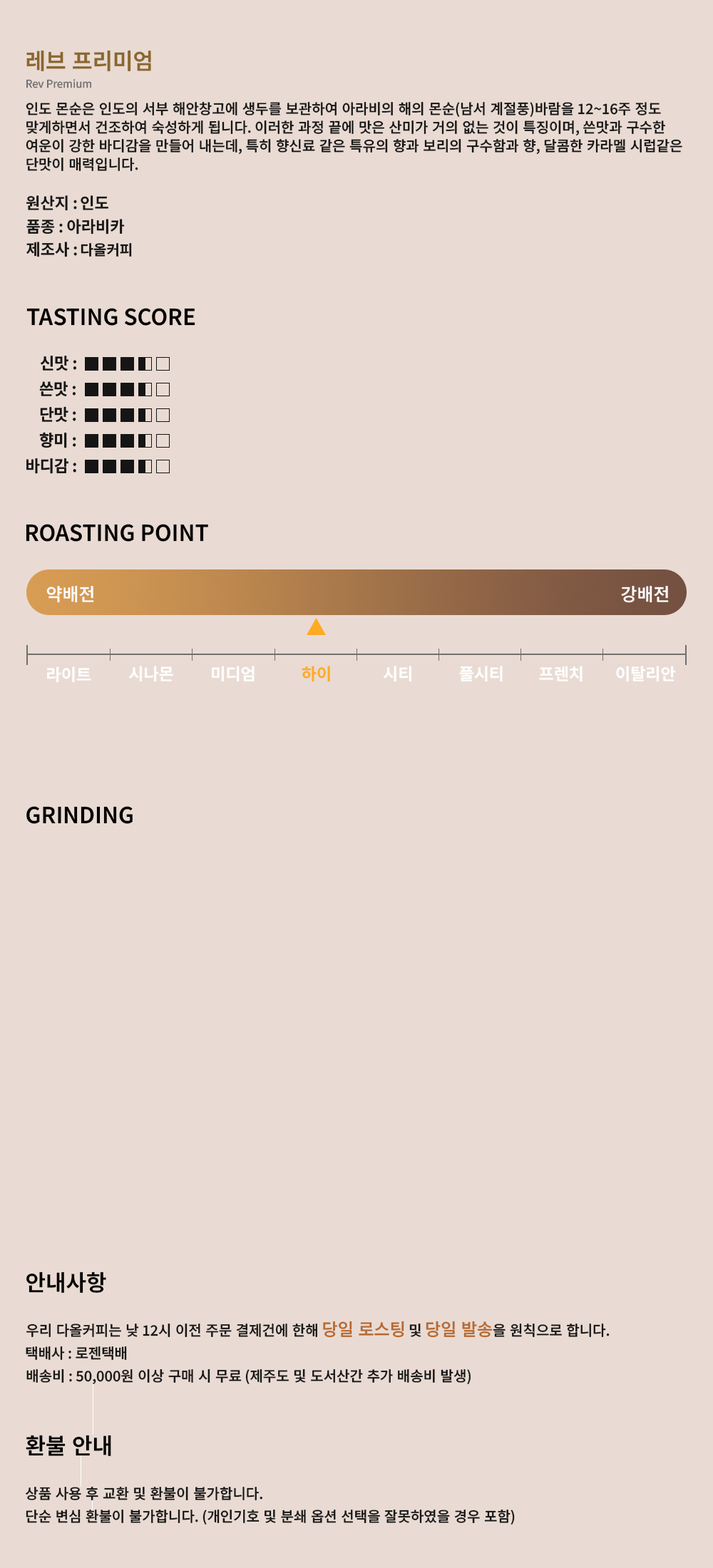
<style>
.page{position:relative;width:713px;height:1568px;background:#e9dbd3}
.page>*{position:absolute;margin:0}
.t1{font:22.1px "NotoSansKR-SemiBold";color:#8b662d}
.t2{font:10.7px "NotoSansKR-Regular";color:#727272}
.t3{font:14.3px/18.5px "NotoSansKR-Medium";color:#151515}
.t4{font:15.7px "NotoSansKR-SemiBold";color:#151515}
.t5{font:14.3px "NotoSansKR-SemiBold";color:#151515}
.t6{font:22.1px "NotoSansKR-SemiBold";color:#000000}
.t7{font:16.1px "NotoSansKR-SemiBold";color:#151515}
.t8{font:16px "NotoSansKR-SemiBold";color:#151515}
.t9{font:17.7px "NotoSansKR-Medium";color:#ffffff}
.t10{font:16.4px "NotoSansKR-SemiBold";color:#ffffff}
.t11{font:16.4px "NotoSansKR-SemiBold";color:#ffaa25}
.t12{font:14.3px "NotoSansKR-Medium";color:#151515}
.t13{font:17.1px "NotoSansKR-Medium";color:#b76930}
</style>
<div class="page">
<p class="t1" style="left:26px;top:50px;width:125px;height:21px">레브 프리미엄</p>
<p class="t2" style="left:26px;top:79px;width:65px;height:9px">Rev Premium</p>
<p class="t3" style="left:26px;top:102px;width:656px;height:69px">인도 몬순은 인도의 서부 해안창고에 생두를 보관하여 아라비의 해의 몬순(남서 계절풍)바람을 12~16주 정도<br>맞게하면서 건조하여 숙성하게 됩니다. 이러한 과정 끝에 맛은 산미가 거의 없는 것이 특징이며, 쓴맛과 구수한<br>여운이 강한 바디감을 만들어 내는데, 특히 향신료 같은 특유의 향과 보리의 구수함과 향, 달콤한 카라멜 시럽같은<br>단맛이 매력입니다.</p>
<p class="t4" style="left:26px;top:195px;width:51px;height:16px">원산지 :</p>
<p class="t4" style="left:81px;top:195px;width:27px;height:15px">인도</p>
<p class="t4" style="left:26px;top:220px;width:37px;height:14px">품종 :</p>
<p class="t4" style="left:67px;top:219px;width:58px;height:15px">아라비카</p>
<p class="t4" style="left:26px;top:242px;width:51px;height:15px">제조사 :</p>
<p class="t5" style="left:81px;top:243px;width:51px;height:14px">다올커피</p>
<p class="t6" style="left:26px;top:308px;width:169px;height:18px">TASTING SCORE</p>
<p class="t7" style="left:40px;top:356px;width:36px;height:15px">신맛 :</p>
<p class="t7" style="left:39px;top:381px;width:37px;height:15px">쓴맛 :</p>
<p class="t7" style="left:40px;top:406px;width:36px;height:16px">단맛 :</p>
<p class="t8" style="left:39px;top:432px;width:37px;height:16px">향미 :</p>
<p class="t7" style="left:26px;top:458px;width:50px;height:16px">바디감 :</p>
<p class="t6" style="left:26px;top:524px;width:182px;height:18px">ROASTING POINT</p>
<p class="t9" style="left:46px;top:586px;width:48px;height:17px">약배전</p>
<p class="t9" style="left:621px;top:586px;width:48px;height:17px">강배전</p>
<p class="t10" style="left:129px;top:666px;width:44px;height:16px">시나몬</p>
<p class="t10" style="left:212px;top:666px;width:42px;height:16px">미디엄</p>
<p class="t11" style="left:301px;top:666px;width:29px;height:16px">하이</p>
<p class="t10" style="left:383px;top:666px;width:28px;height:16px">시티</p>
<p class="t10" style="left:459px;top:666px;width:43px;height:16px">풀시티</p>
<p class="t10" style="left:539px;top:666px;width:43px;height:16px">프렌치</p>
<p class="t10" style="left:616px;top:666px;width:60px;height:16px">이탈리안</p>
<p class="t10" style="left:47px;top:666px;width:44px;height:17px">라이트</p>
<p class="t6" style="left:26px;top:806px;width:107px;height:18px">GRINDING</p>
<p class="t6" style="left:26px;top:1272px;width:80px;height:21px">안내사항</p>
<p class="t12" style="left:26px;top:1321px;width:583px;height:17px">우리 다올커피는 낮 12시 이전 주문 결제건에 한해 <span class="t13">당일 로스팅</span> 및 <span class="t13">당일 발송</span>을 원칙으로 합니다.</p>
<p class="t12" style="left:26px;top:1346px;width:101px;height:14px">택배사 : 로젠택배</p>
<p class="t12" style="left:26px;top:1369px;width:444px;height:16px">배송비 : 50,000원 이상 구매 시 무료 (제주도 및 도서산간 추가 배송비 발생)</p>
<p class="t6" style="left:26px;top:1435px;width:85px;height:21px">환불 안내</p>
<p class="t12" style="left:26px;top:1487px;width:236px;height:13px">상품 사용 후 교환 및 환불이 불가합니다.</p>
<p class="t12" style="left:26px;top:1510px;width:489px;height:15px">단순 변심 환불이 불가합니다. (개인기호 및 분쇄 옵션 선택을 잘못하였을 경우 포함)</p>
</div>
